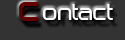
<style>
.page{position:relative;width:125px;height:40px;background:#333333}
.page>*{position:absolute;margin:0}
.t1{font:20px "BirdmanBold";color:#ffffff}
.t2{font:30px "BirdmanBold";color:#650000}
</style>
<div class="page">
<p class="t1" style="left:19px;top:2px;width:94px;height:19px"><span class="t2">c </span>ontact</p>
</div>
